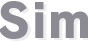
<style>
.page{position:relative;width:88px;height:42px;background:#8c8b93}
.page>*{position:absolute;margin:0}
.t1{font:46.7px "RodinPro-EB";letter-spacing:0.027em;color:#8c8b93}
</style>
<div class="page">
<p class="t1" style="left:0px;top:1px;width:89px;height:38px">Sim</p>
</div>
